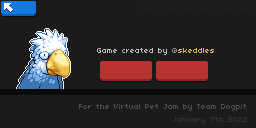
<style>
.page{position:relative;width:256px;height:128px;background:#1b1b1b}
.page>*{position:absolute;margin:0}
.t1{font:8px "04b03";color:#202020}
.t2{font:8px "04b03";color:#c8c8c8}
.t3{font:8px "04b03";color:#909090}
.t4{font:8px "04b03";color:#e9c14d}
.t5{font:8px "04b03";color:#4e4e4e}
.t6{font:8px "04b03";color:#333333}
</style>
<div class="page">
<p class="t1" style="left:142px;top:6px;width:107px;height:7px">Sorry no options here lol</p>
<p class="t2" style="left:97px;top:48px;width:117px;height:7px;opacity:0.9">Game created by<span class="t3"> @</span><span class="t4">skeddles</span></p>
<p class="t5" style="left:79px;top:104px;width:167px;height:7px">For the Virtual Pet Jam by Team Dogpit</p>
<p class="t6" style="left:172px;top:117px;width:75px;height:7px">January 7th 2022</p>
</div>
